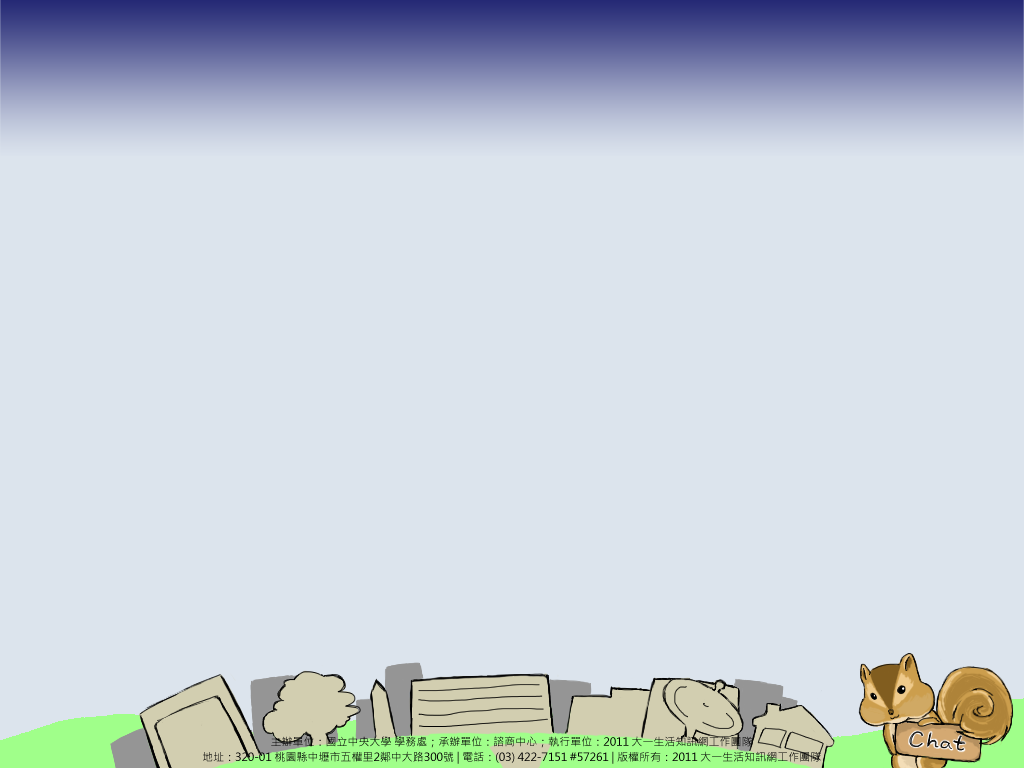
<style>
.page{position:relative;width:1024px;height:768px;background:#dce4ed}
.page>*{position:absolute;margin:0}
.t1{font:11px "MicrosoftJhengHeiRegular";color:#000000}
</style>
<div class="page">
<p class="t1" style="left:271px;top:736px;width:481px;height:12px">主辦單位：國立中央大學 學務處；承辦單位：諮商中心；執行單位：2011 大一生活知訊網工作團隊</p>
<p class="t1" style="left:203px;top:751px;width:618px;height:13px">地址：320-01 桃園縣中壢市五權里2鄰中大路300號 | 電話：(03) 422-7151 #57261 | 版權所有：2011 大一生活知訊網工作團隊</p>
</div>
